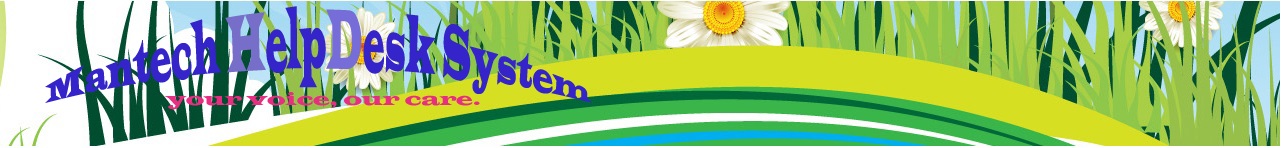
<style>
.page{position:relative;width:1281px;height:148px}
.page>*{position:absolute;margin:0}
.t1{font:24px "LatinWide";color:#3424ca}
.t2{font:24px "LatinWide";color:#776ec9}
.t3{font:24px "LatinWide";color:#776dd9}
.t4{font:18.7px "LatinWide";color:#e72e81}
</style>
<div class="page">
<p class="t1" style="left:45px;top:6px;width:547px;height:97px;text-align:center">Mantech <span class="t2">H</span>elp<span class="t3">D</span>esk System</p>
<p class="t4" style="left:165px;top:92px;width:315px;height:18px">your voice, our care.</p>
</div>
